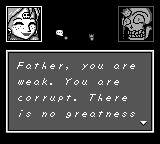
<style>
.page{position:relative;width:160px;height:144px;background:#555555}
.page>*{position:absolute;margin:0}
.t1{font:12px "ZeldaDXTT-BRK-";color:#ffffff}
</style>
<div class="page">
<p class="t1" style="left:17px;top:62px;width:118px;height:8px">Father, you are</p>
<p class="t1" style="left:18px;top:78px;width:101px;height:7px">weak. You are</p>
<p class="t1" style="left:18px;top:94px;width:109px;height:8px">corrupt. There</p>
<p class="t1" style="left:19px;top:110px;width:116px;height:8px">is no greatness</p>
</div>
